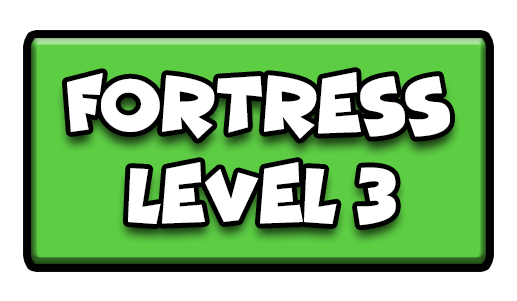
<style>
.page{position:relative;width:517px;height:301px;background:#ffffff}
.page>*{position:absolute;margin:0}
.t1{font:77.7px "Funhouse";color:#ffffff;scale:0.95 1}
</style>
<div class="page">
<p class="t1" style="left:67px;top:72px;width:383px;height:67px">FORTRESS</p>
<p class="t1" style="left:128px;top:162px;width:268px;height:64px">LEVEL 3</p>
</div>
